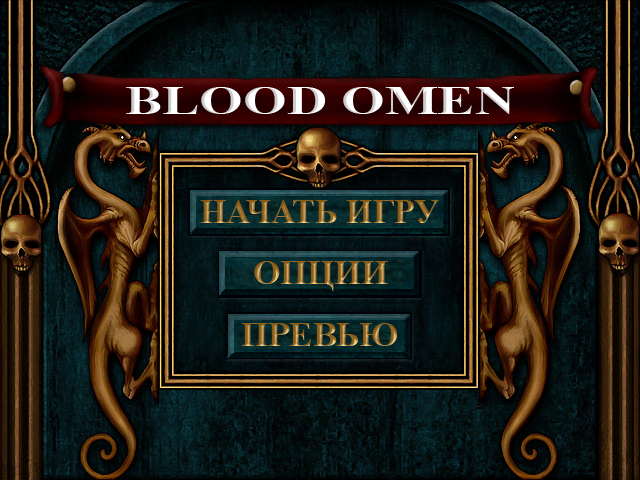
<style>
.page{position:relative;width:640px;height:480px}
.page>*{position:absolute;margin:0}
.t1{font:40px "TimesNewRomanPS-BoldMT";color:#ffffff;font-variant:small-caps;scale:1.4 1}
.t2{font:34.3px "TimesNewRomanPS-BoldMT";text-transform:uppercase}
.t3{font:29.1px "TimesNewRomanPS-BoldMT";text-transform:uppercase;scale:1.14 1}
.t4{font:29.1px "TimesNewRomanPS-BoldMT";text-transform:uppercase;scale:1.16 1}
</style>
<div class="page">
<p class="t1" style="left:126px;top:87px;width:388px;height:27px">BLOOD OMEN</p>
<p class="t2" style="left:200px;top:200px;width:239px;height:23px">начать игру</p>
<p class="t3" style="left:203px;top:201px;width:233px;height:19px">начать игру</p>
<p class="t2" style="left:254px;top:261px;width:134px;height:30px">опции</p>
<p class="t4" style="left:256px;top:263px;width:130px;height:25px">опции</p>
<p class="t2" style="left:241px;top:323px;width:157px;height:23px">превью</p>
<p class="t4" style="left:243px;top:325px;width:152px;height:19px">превью</p>
</div>
